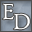
<style>
.page{position:relative;width:32px;height:32px}
.page>*{position:absolute;margin:0}
.t1{font:24px "Dark11";color:#ffffff}
</style>
<div class="page">
<p class="t1" style="left:2px;top:3px;width:12px;height:17px">E</p>
<p class="t1" style="left:13px;top:13px;width:17px;height:17px">D</p>
</div>
